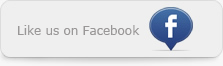
<style>
.page{position:relative;width:223px;height:66px;background:#efefef}
.page>*{position:absolute;margin:0}
.t1{font:12px "Verdana";color:#999797}
</style>
<div class="page">
<p class="t1" style="left:18px;top:25px;width:122px;height:10px">Like us on Facebook</p>
</div>
